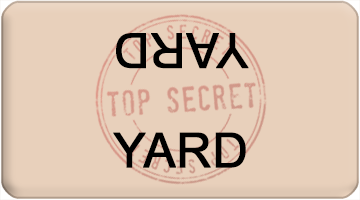
<style>
.page{position:relative;width:360px;height:200px;background:#e8d0bb}
.page>*{position:absolute;margin:0}
.t1{font:48px "ArialMT";color:#000000;font-weight:bold}
</style>
<div class="page">
<p class="t1" style="left:116px;top:33px;width:133px;height:36px;rotate:180deg">YARD</p>
<p class="t1" style="left:113px;top:132px;width:133px;height:36px">YARD</p>
</div>
